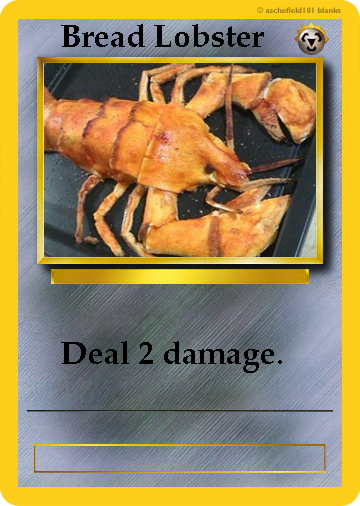
<style>
.page{position:relative;width:360px;height:506px}
.page>*{position:absolute;margin:0}
.t1{font:32px "PalatinoLinotype-Bold";color:#000000}
</style>
<div class="page">
<p class="t1" style="left:61px;top:24px;width:203px;height:23px">Bread Lobster</p>
<p class="t1" style="left:61px;top:341px;width:221px;height:32px">Deal 2 damage.</p>
</div>
